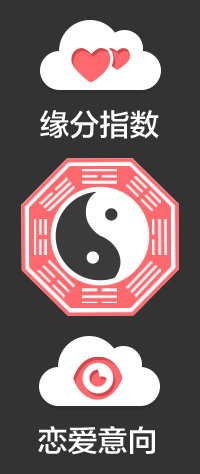
<style>
.page{position:relative;width:200px;height:474px;background:#333333}
.page>*{position:absolute;margin:0}
.t1{font:30px "FZLTZHK--GBK1-0";color:#ffffff}
</style>
<div class="page">
<p class="t1" style="left:40px;top:110px;width:119px;height:29px">缘分指数</p>
<p class="t1" style="left:38px;top:426px;width:117px;height:29px">恋爱意向</p>
</div>
